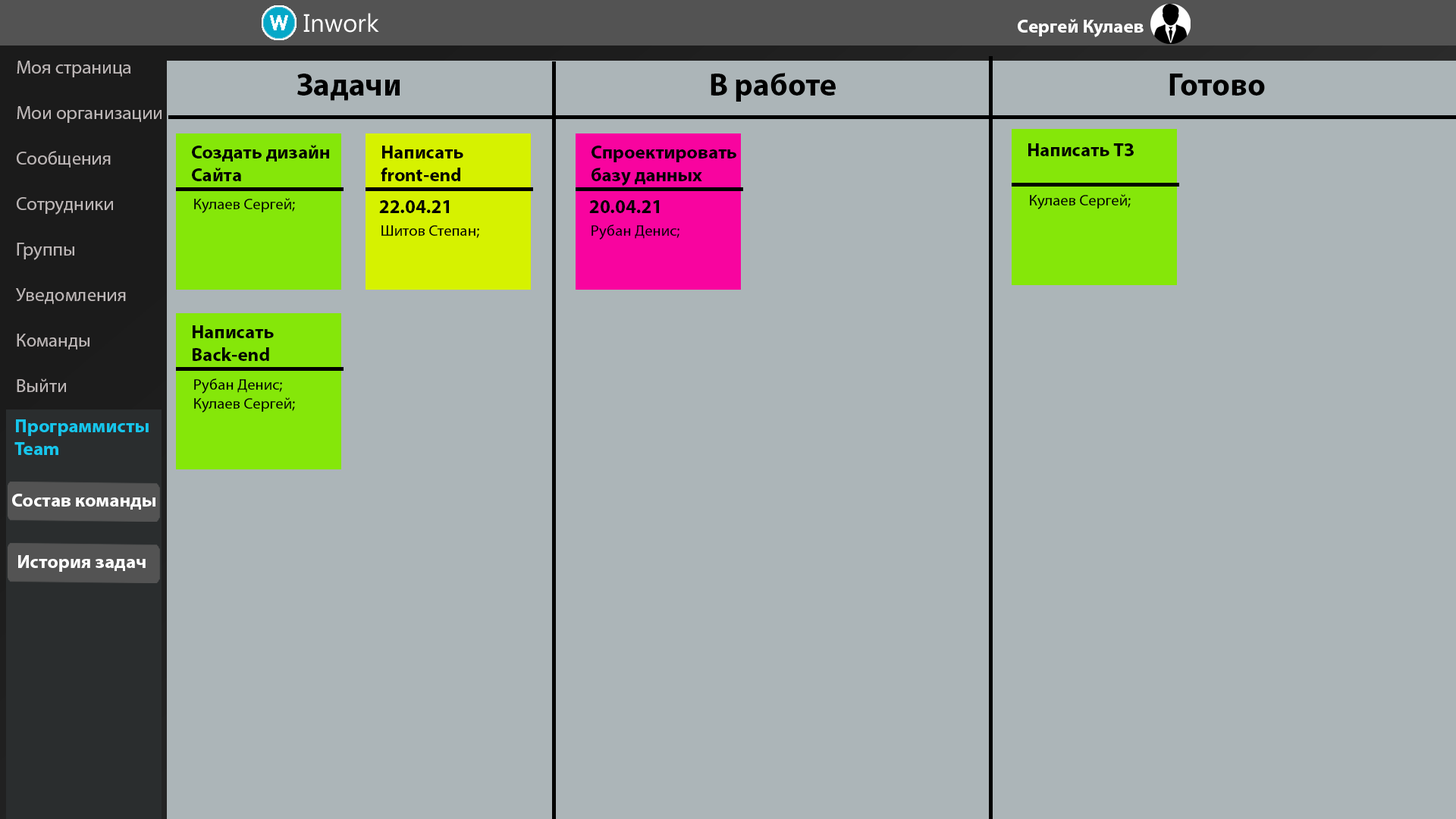
<style>
.page{position:relative;width:1456px;height:819px;background:#acb5b8}
.page>*{position:absolute;margin:0}
.t1{font:19px "MyriadPro-Bold";color:#ffffff}
.t2{font:19px "MyriadPro-Regular";color:#bdb7b7}
.t3{font:31.6px "MyriadPro-Bold";color:#000000}
.t4{font:19px "MyriadPro-Bold";color:#000000}
.t5{font:15.8px "MyriadPro-Regular";color:#000000}
.t6{font:19px "MyriadPro-Bold";color:#16c6ec}
</style>
<div class="page">
<p class="t1" style="left:1018px;top:19px;width:126px;height:18px">Сергей Кулаев</p>
<p class="t2" style="left:16px;top:61px;width:146px;height:331px">Моя страница<br><br>Мои организации<br><br>Сообщения<br><br>Сотрудники<br><br>Группы<br><br>Уведомления<br><br>Команды<br><br>Выйти</p>
<p class="t3" style="left:297px;top:74px;width:103px;height:27px">Задачи</p>
<p class="t3" style="left:711px;top:73px;width:125px;height:29px">В работе</p>
<p class="t3" style="left:1169px;top:74px;width:96px;height:22px">Готово</p>
<p class="t4" style="left:192px;top:145px;width:137px;height:36px">Создать дизайн<br>Сайта</p>
<p class="t4" style="left:381px;top:146px;width:82px;height:35px">Написать <br>front-end</p>
<p class="t4" style="left:591px;top:146px;width:145px;height:40px">Спроектировать <br>базу данных</p>
<p class="t4" style="left:1028px;top:143px;width:106px;height:13px">Написать ТЗ</p>
<p class="t5" style="left:194px;top:198px;width:101px;height:15px">Кулаев Сергей;</p>
<p class="t5" style="left:1030px;top:194px;width:101px;height:15px">Кулаев Сергей;</p>
<p class="t4" style="left:379px;top:200px;width:70px;height:13px">22.04.21</p>
<p class="t4" style="left:589px;top:200px;width:70px;height:13px">20.04.21</p>
<p class="t5" style="left:381px;top:225px;width:98px;height:13px">Шитов Степан;</p>
<p class="t5" style="left:591px;top:224px;width:88px;height:16px">Рубан Денис;</p>
<p class="t4" style="left:193px;top:325px;width:81px;height:36px">Написать <br>Back-end</p>
<p class="t5" style="left:194px;top:378px;width:101px;height:35px">Рубан Денис;<br>Кулаев Сергей;</p>
<p class="t6" style="left:14px;top:419px;width:135px;height:36px">Программисты<br>Team</p>
<p class="t1" style="left:12px;top:494px;width:143px;height:16px">Состав команды</p>
<p class="t1" style="left:18px;top:555px;width:128px;height:17px">История задач</p>
</div>
